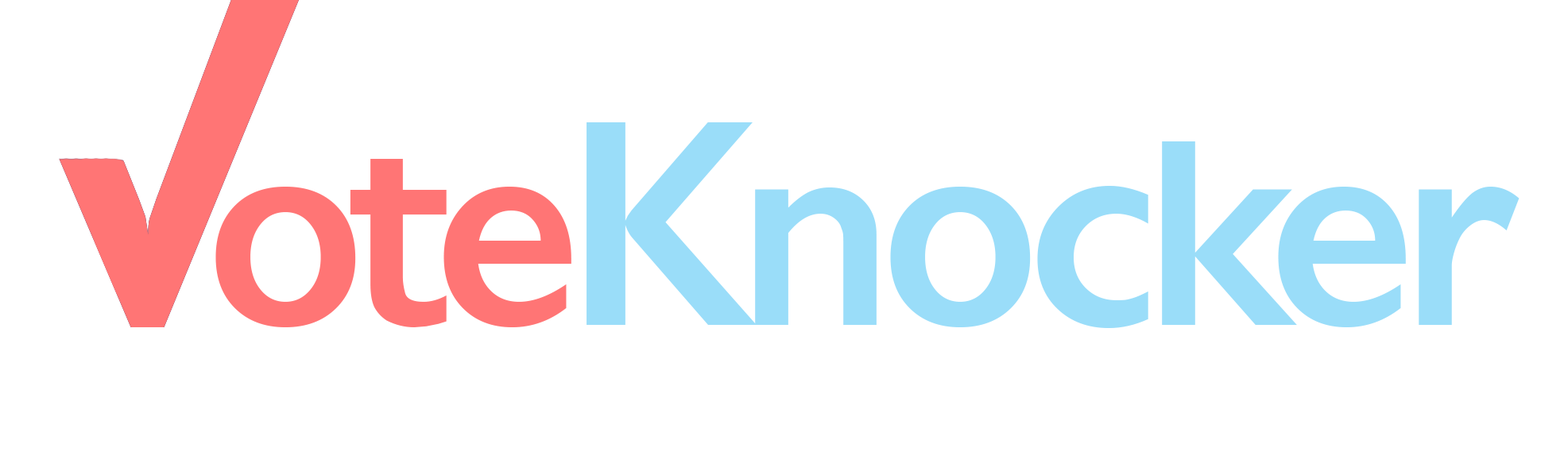
<style>
.page{position:relative;width:1568px;height:475px;background:#ffffff}
.page>*{position:absolute;margin:0}
.t1{font:254.2px "Chantilly-Medium";letter-spacing:-0.04em;color:#9addf9}
.t2{font:254.2px "Chantilly-Medium";letter-spacing:-0.04em;color:#ff7575}
.t3{font:280.7px "Chantilly-Medium";letter-spacing:-0.04em;color:#9addf9}
</style>
<div class="page">
<p class="t1" style="left:215px;top:122px;width:1305px;height:206px"><span class="t2">ote</span><span class="t3">K</span>nocker</p>
</div>
